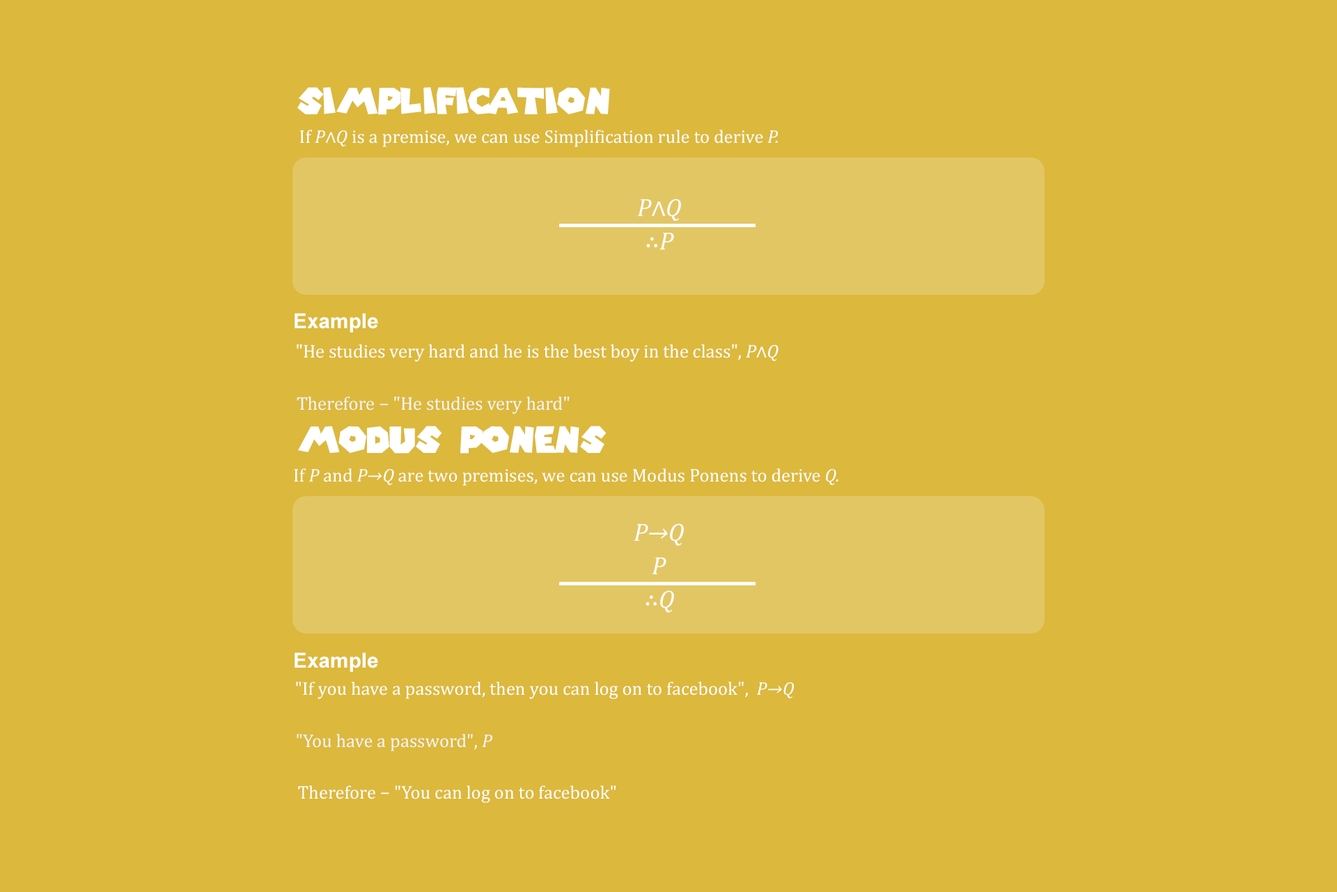
<style>
.page{position:relative;width:1337px;height:892px;background:#dcb83d}
.page>*{position:absolute;margin:0}
.t1{font:35.9px "SuperMarioGalaxy";color:#ffffff}
.t2{font:18.5px "Cambria";color:#ffffff}
.t3{font:18.5px "Cambria-Italic";color:#ffffff}
.t4{font:25.1px/33.4px "Cambria-Italic";color:#ffffff}
.t5{font:25.1px/33.4px "Cambria";color:#ffffff}
.t6{font:20.8px "Arial-BoldMT";color:#ffffff}
.t7{font:18.6px "Cambria";color:#ffffff}
.t8{font:18.6px "Cambria-Italic";color:#ffffff}
.t9{font:18.6px "Cambria";color:#f5f5f5}
.t10{font:18.5px "Cambria";color:#f5f5f5}
.t11{font:18.5px "Cambria-Italic";color:#f5f5f5}
</style>
<div class="page">
<p class="t1" style="left:297px;top:87px;width:313px;height:28px">Simplification</p>
<p class="t2" style="left:300px;top:130px;width:478px;height:17px">If <span class="t3">P</span>∧<span class="t3">Q</span> is a premise, we can use Simplification rule to derive <span class="t3">P.</span></p>
<p class="t4" style="left:637px;top:199px;width:44px;height:50px;text-align:center">P<span class="t5">∧</span>Q<br><span class="t5">∴</span>P</p>
<p class="t6" style="left:295px;top:313px;width:83px;height:19px">Example</p>
<p class="t7" style="left:297px;top:344px;width:482px;height:18px">"He studies very hard and he is the best boy in the class", <span class="t8">P</span>∧<span class="t8">Q</span></p>
<p class="t9" style="left:297px;top:396px;width:273px;height:18px">Therefore − "He studies very hard"</p>
<p class="t1" style="left:298px;top:426px;width:309px;height:27px">Modus Ponens</p>
<p class="t2" style="left:294px;top:468px;width:545px;height:18px">If <span class="t3">P</span> and <span class="t3">P</span><span class="t3">→</span><span class="t3">Q</span> are two premises, we can use Modus Ponens to derive <span class="t3">Q.</span></p>
<p class="t4" style="left:634px;top:523px;width:50px;height:89px;text-align:center">P→Q<br>P<br><span class="t5">∴</span>Q</p>
<p class="t6" style="left:295px;top:652px;width:83px;height:19px">Example</p>
<p class="t2" style="left:296px;top:681px;width:498px;height:18px">"If you have a password, then you can log on to facebook",  <span class="t3">P→Q</span></p>
<p class="t10" style="left:297px;top:733px;width:195px;height:18px">"You have a password", <span class="t11">P</span></p>
<p class="t2" style="left:298px;top:785px;width:318px;height:17px">Therefore − "You can log on to facebook"</p>
</div>
